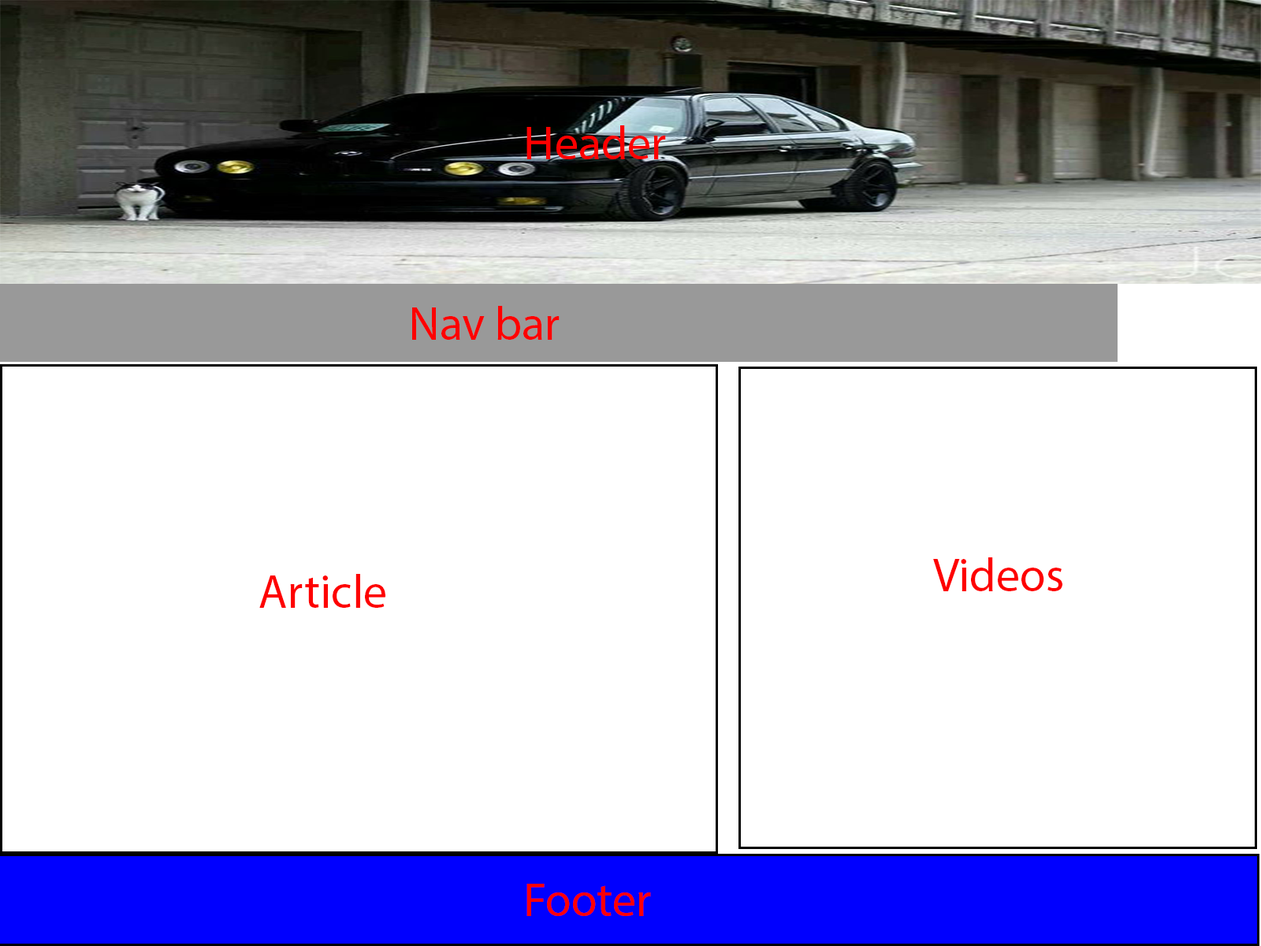
<style>
.page{position:relative;width:1261px;height:946px;background:#ffffff}
.page>*{position:absolute;margin:0}
.t1{font:47.3px "MyriadPro-Regular";color:#fe0000}
</style>
<div class="page">
<p class="t1" style="left:526px;top:125px;width:140px;height:34px">Header</p>
<p class="t1" style="left:412px;top:306px;width:148px;height:34px">Nav bar</p>
<p class="t1" style="left:933px;top:557px;width:129px;height:34px">Videos</p>
<p class="t1" style="left:259px;top:574px;width:126px;height:34px">Article</p>
<p class="t1" style="left:526px;top:883px;width:125px;height:33px">Footer</p>
</div>
